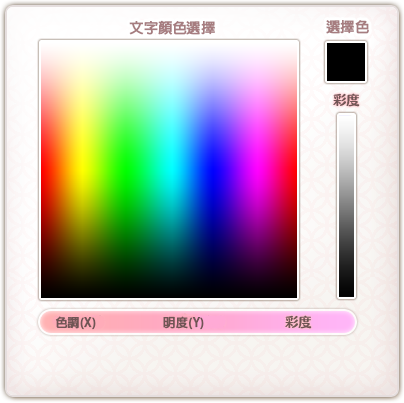
<style>
.page{position:relative;width:404px;height:403px}
.page>*{position:absolute;margin:0}
.t1{font:14px "AdobeFanHeitiStd-Bold";color:#a67d80;font-weight:bold}
.t2{font:12px "AdobeFanHeitiStd-Bold";color:#705555;font-weight:bold}
</style>
<div class="page">
<p class="t1" style="left:129px;top:20px;width:86px;height:15px">文字顏色選擇</p>
<p class="t1" style="left:326px;top:20px;width:43px;height:14px">選擇色</p>
<p class="t2" style="left:55px;top:316px;width:41px;height:14px">色調(X)</p>
<p class="t2" style="left:163px;top:316px;width:41px;height:14px">明度(Y)</p>
</div>
